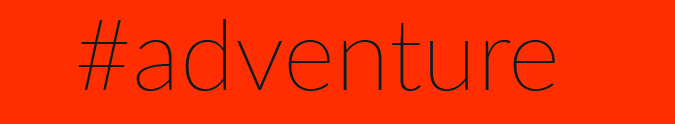
<style>
.page{position:relative;width:675px;height:124px;background:#ff2e00}
.page>*{position:absolute;margin:0}
.t1{font:100px "Lato-Thin";color:#141819}
</style>
<div class="page">
<p class="t1" style="left:78px;top:19px;width:477px;height:72px">#adventure</p>
</div>
